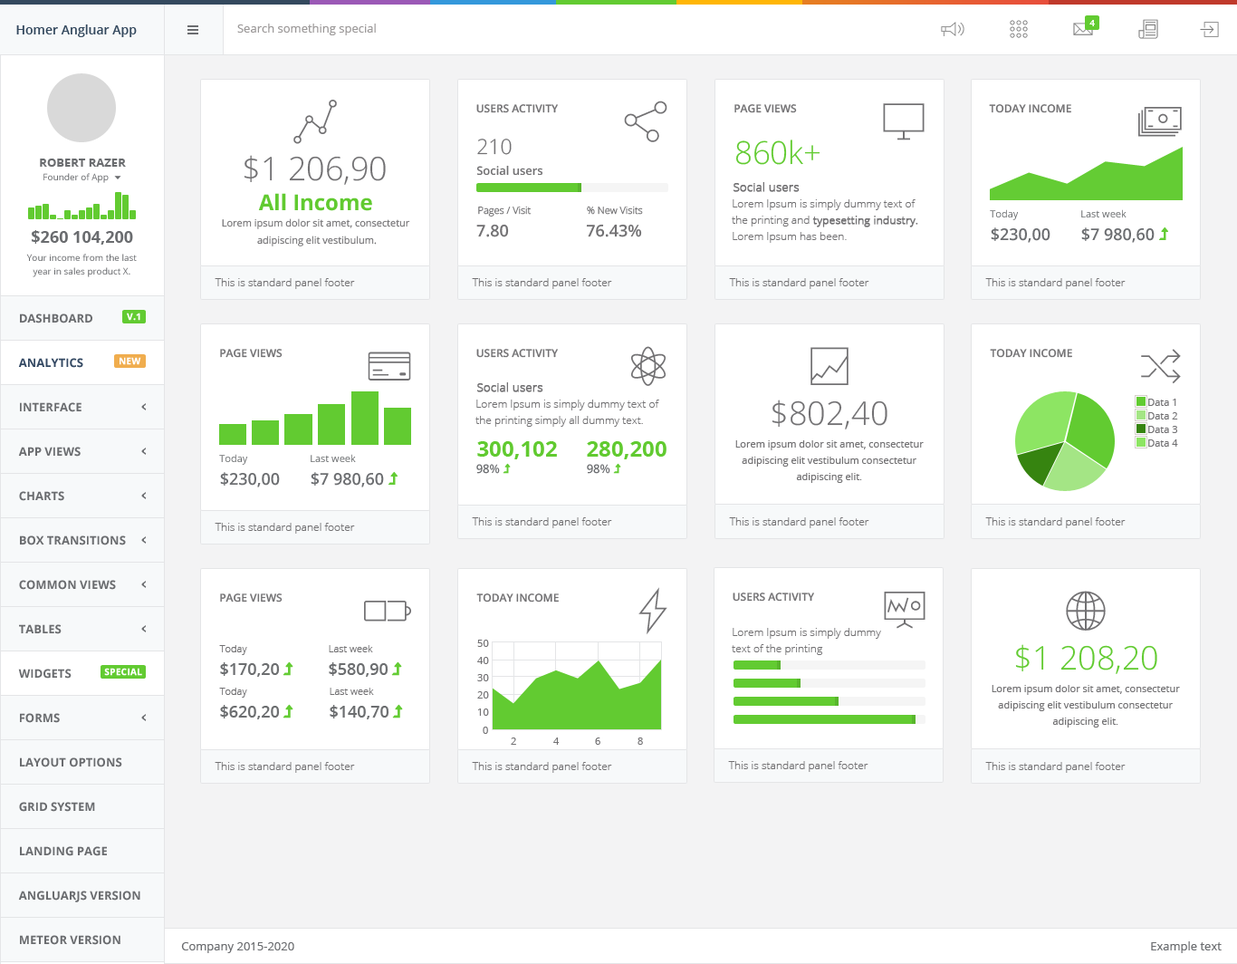
<style>
.page{position:relative;width:1237px;height:964px;background:#ffffff}
.page>*{position:absolute;margin:0}
.t1{font:12.7px "OpenSans-Semibold";color:#34495e}
.t2{font:11.8px "OpenSans";color:#9c9999}
.t3{font:9.1px "OpenSans-Bold";color:#ffffff}
.t4{font:10.9px "OpenSans-Semibold";color:#727173}
.t5{font:20.8px "OpenSans-Light";color:#727173}
.t6{font:31.7px "OpenSans-Light";color:#62cb31}
.t7{font:11.8px "OpenSans-Bold";color:#6a6c6f}
.t8{font:32.6px "OpenSans-Light";color:#727173}
.t9{font:9.1px "OpenSans";color:#6a6c6f}
.t10{font:11.8px "OpenSans-Semibold";color:#727173}
.t11{font:11.8px "OpenSans-Light";color:#727173;font-weight:bold}
.t12{font:21.7px "OpenSans-Bold";color:#61ca30}
.t13{font:10px "OpenSans-Light";color:#727173}
.t14{font:10.9px/16.3px "OpenSans-Light";color:#727173}
.t15{font:10.9px/16.3px "OpenSans-Light";color:#727173;font-weight:bold}
.t16{font:10px "OpenSans";color:#676a6c}
.t17{font:10px/17.2px "OpenSans";color:#727173}
.t18{font:16.3px "OpenSans-Bold";color:#6a6c6f}
.t19{font:16.3px "OpenSans-Semibold";color:#727173}
.t20{font:16.3px "OpenSans-Semibold";color:#6c6e71}
.t21{font:9.1px/13.6px "OpenSans";color:#6a6c6f}
.t22{font:10.9px "OpenSans-Light";color:#727173}
.t23{font:9.1px "OpenSans-Bold";color:#ffffff;font-weight:bold}
.t24{font:11.8px "OpenSans-Bold";color:#344963}
.t25{font:10px "OpenSans";color:#727173}
.t26{font:10px/16.3px "OpenSans";color:#727173}
.t27{font:11.8px "OpenSans-Semibold";color:#6c6e71}
.t28{font:32.6px "OpenSans-Light";color:#62cb31}
.t29{font:16.3px "OpenSans-Semibold";color:#6c6e70}
.t30{font:11.8px "OpenSans";color:#6a6c6f}
</style>
<div class="page">
<p class="t1" style="left:16px;top:24px;width:121px;height:13px">Homer Angluar App</p>
<p class="t2" style="left:237px;top:24px;width:139px;height:11px">Search something special</p>
<p class="t3" style="left:1090px;top:20px;width:5px;height:6px">4</p>
<p class="t4" style="left:476px;top:104px;width:82px;height:9px">USERS ACTIVITY</p>
<p class="t4" style="left:735px;top:104px;width:62px;height:9px">PAGE VIEWS</p>
<p class="t4" style="left:989px;top:104px;width:83px;height:9px">TODAY INCOME</p>
<p class="t5" style="left:477px;top:139px;width:35px;height:16px">210</p>
<p class="t6" style="left:735px;top:139px;width:86px;height:26px">860k+</p>
<p class="t7" style="left:40px;top:159px;width:86px;height:8px">ROBERT RAZER</p>
<p class="t8" style="left:244px;top:155px;width:142px;height:30px">$1 206,90</p>
<p class="t9" style="left:43px;top:173px;width:66px;height:10px">Founder of App</p>
<p class="t10" style="left:476px;top:165px;width:67px;height:11px">Social users</p>
<p class="t11" style="left:734px;top:182px;width:66px;height:10px">Social users</p>
<p class="t12" style="left:258px;top:193px;width:114px;height:18px">All Income</p>
<p class="t13" style="left:478px;top:206px;width:54px;height:10px">Pages / Visit</p>
<p class="t13" style="left:587px;top:206px;width:56px;height:9px">% New Visits</p>
<p class="t14" style="left:732px;top:199px;width:186px;height:44px">Lorem Ipsum is simply dummy text of the printing and<span class="t15"> typesetting industry. </span>Lorem Ipsum has been.</p>
<p class="t16" style="left:990px;top:209px;width:29px;height:11px">Today</p>
<p class="t16" style="left:1081px;top:209px;width:46px;height:8px">Last week</p>
<p class="t17" style="left:222px;top:218px;width:188px;height:28px;text-align:center">Lorem ipsum dolor sit amet, consectetur <br>adipiscing elit vestibulum.</p>
<p class="t18" style="left:32px;top:230px;width:101px;height:15px">$260 104,200</p>
<p class="t19" style="left:476px;top:224px;width:33px;height:13px">7.80</p>
<p class="t19" style="left:586px;top:224px;width:56px;height:13px">76.43%</p>
<p class="t20" style="left:991px;top:227px;width:60px;height:16px">$230,00</p>
<p class="t20" style="left:1081px;top:227px;width:74px;height:16px">$7 980,60</p>
<p class="t21" style="left:26px;top:254px;width:111px;height:23px;text-align:center">Your income from the last<br>year in sales product X.</p>
<p class="t22" style="left:215px;top:278px;width:140px;height:11px">This is standard panel footer</p>
<p class="t22" style="left:472px;top:278px;width:140px;height:11px">This is standard panel footer</p>
<p class="t22" style="left:729px;top:278px;width:141px;height:11px">This is standard panel footer</p>
<p class="t22" style="left:985px;top:278px;width:141px;height:11px">This is standard panel footer</p>
<p class="t7" style="left:20px;top:313px;width:72px;height:10px">DASHBOARD</p>
<p class="t23" style="left:127px;top:312px;width:13px;height:9px">V.1</p>
<p class="t4" style="left:220px;top:349px;width:63px;height:9px">PAGE VIEWS</p>
<p class="t4" style="left:476px;top:349px;width:82px;height:9px">USERS ACTIVITY</p>
<p class="t4" style="left:990px;top:349px;width:82px;height:9px">TODAY INCOME</p>
<p class="t24" style="left:18px;top:358px;width:65px;height:10px">ANALYTICS</p>
<p class="t23" style="left:120px;top:357px;width:21px;height:8px">NEW</p>
<p class="t11" style="left:477px;top:382px;width:66px;height:10px">Social users</p>
<p class="t14" style="left:476px;top:399px;width:183px;height:28px">Lorem Ipsum is simply dummy text of the printing simply all dummy text.</p>
<p class="t8" style="left:772px;top:399px;width:116px;height:30px">$802,40</p>
<p class="t25" style="left:1149px;top:399px;width:28px;height:7px">Data 1</p>
<p class="t7" style="left:20px;top:402px;width:62px;height:10px">INTERFACE</p>
<p class="t25" style="left:1149px;top:412px;width:29px;height:7px">Data 2</p>
<p class="t25" style="left:1149px;top:426px;width:29px;height:7px">Data 3</p>
<p class="t7" style="left:18px;top:447px;width:63px;height:10px">APP VIEWS</p>
<p class="t12" style="left:477px;top:441px;width:80px;height:18px">300,102</p>
<p class="t12" style="left:587px;top:441px;width:80px;height:18px">280,200</p>
<p class="t26" style="left:735px;top:440px;width:189px;height:43px;text-align:center">Lorem ipsum dolor sit amet, consectetur adipiscing elit vestibulum consectetur adipiscing elit.</p>
<p class="t25" style="left:1149px;top:439px;width:29px;height:8px">Data 4</p>
<p class="t16" style="left:219px;top:454px;width:29px;height:11px">Today</p>
<p class="t16" style="left:311px;top:454px;width:45px;height:8px">Last week</p>
<p class="t20" style="left:220px;top:472px;width:60px;height:15px">$230,00</p>
<p class="t20" style="left:311px;top:472px;width:73px;height:15px">$7 980,60</p>
<p class="t27" style="left:476px;top:464px;width:24px;height:10px">98%</p>
<p class="t27" style="left:587px;top:464px;width:23px;height:10px">98%</p>
<p class="t7" style="left:19px;top:491px;width:45px;height:10px">CHARTS</p>
<p class="t22" style="left:472px;top:517px;width:140px;height:11px">This is standard panel footer</p>
<p class="t22" style="left:729px;top:517px;width:141px;height:11px">This is standard panel footer</p>
<p class="t22" style="left:985px;top:517px;width:141px;height:11px">This is standard panel footer</p>
<p class="t22" style="left:215px;top:523px;width:140px;height:11px">This is standard panel footer</p>
<p class="t7" style="left:20px;top:535px;width:106px;height:10px">BOX TRANSITIONS</p>
<p class="t7" style="left:19px;top:580px;width:97px;height:10px">COMMON VIEWS</p>
<p class="t4" style="left:220px;top:593px;width:63px;height:9px">PAGE VIEWS</p>
<p class="t4" style="left:476px;top:593px;width:83px;height:9px">TODAY INCOME</p>
<p class="t4" style="left:733px;top:592px;width:81px;height:9px">USERS ACTIVITY</p>
<p class="t7" style="left:19px;top:624px;width:43px;height:10px">TABLES</p>
<p class="t14" style="left:732px;top:628px;width:149px;height:27px">Lorem Ipsum is simply dummy text of the printing</p>
<p class="t25" style="left:477px;top:639px;width:12px;height:8px">50</p>
<p class="t13" style="left:219px;top:645px;width:28px;height:10px">Today</p>
<p class="t13" style="left:329px;top:645px;width:44px;height:7px">Last week</p>
<p class="t28" style="left:1015px;top:644px;width:143px;height:30px">$1 208,20</p>
<p class="t29" style="left:220px;top:662px;width:60px;height:15px">$170,20</p>
<p class="t29" style="left:329px;top:662px;width:60px;height:15px">$580,90</p>
<p class="t25" style="left:477px;top:657px;width:12px;height:7px">40</p>
<p class="t7" style="left:18px;top:668px;width:54px;height:10px">WIDGETS</p>
<p class="t23" style="left:104px;top:668px;width:38px;height:8px">SPECIAL</p>
<p class="t25" style="left:477px;top:674px;width:12px;height:7px">30</p>
<p class="t13" style="left:219px;top:687px;width:28px;height:10px">Today</p>
<p class="t13" style="left:330px;top:687px;width:44px;height:8px">Last week</p>
<p class="t26" style="left:992px;top:685px;width:188px;height:42px;text-align:center">Lorem ipsum dolor sit amet, consectetur adipiscing elit vestibulum consectetur adipiscing elit.</p>
<p class="t25" style="left:477px;top:691px;width:12px;height:7px">20</p>
<p class="t7" style="left:20px;top:713px;width:40px;height:10px">FORMS</p>
<p class="t29" style="left:220px;top:705px;width:60px;height:14px">$620,20</p>
<p class="t29" style="left:330px;top:705px;width:59px;height:14px">$140,70</p>
<p class="t25" style="left:478px;top:708px;width:11px;height:8px">10</p>
<p class="t25" style="left:483px;top:726px;width:5px;height:8px">0</p>
<p class="t25" style="left:511px;top:737px;width:5px;height:8px">2</p>
<p class="t25" style="left:553px;top:737px;width:7px;height:8px">4</p>
<p class="t25" style="left:595px;top:737px;width:6px;height:8px">6</p>
<p class="t25" style="left:638px;top:737px;width:5px;height:8px">8</p>
<p class="t7" style="left:20px;top:757px;width:102px;height:10px">LAYOUT OPTIONS</p>
<p class="t22" style="left:215px;top:762px;width:140px;height:11px">This is standard panel footer</p>
<p class="t22" style="left:472px;top:762px;width:140px;height:11px">This is standard panel footer</p>
<p class="t22" style="left:728px;top:761px;width:141px;height:11px">This is standard panel footer</p>
<p class="t22" style="left:985px;top:762px;width:141px;height:11px">This is standard panel footer</p>
<p class="t7" style="left:19px;top:802px;width:76px;height:10px">GRID SYSTEM</p>
<p class="t7" style="left:20px;top:846px;width:87px;height:10px">LANDING PAGE</p>
<p class="t7" style="left:18px;top:890px;width:122px;height:12px">ANGLUARJS VERSION</p>
<p class="t7" style="left:20px;top:935px;width:100px;height:10px">METEOR VERSION</p>
<p class="t30" style="left:1151px;top:941px;width:71px;height:12px">Example text</p>
<p class="t30" style="left:181px;top:942px;width:113px;height:11px">Company 2015-2020</p>
</div>
